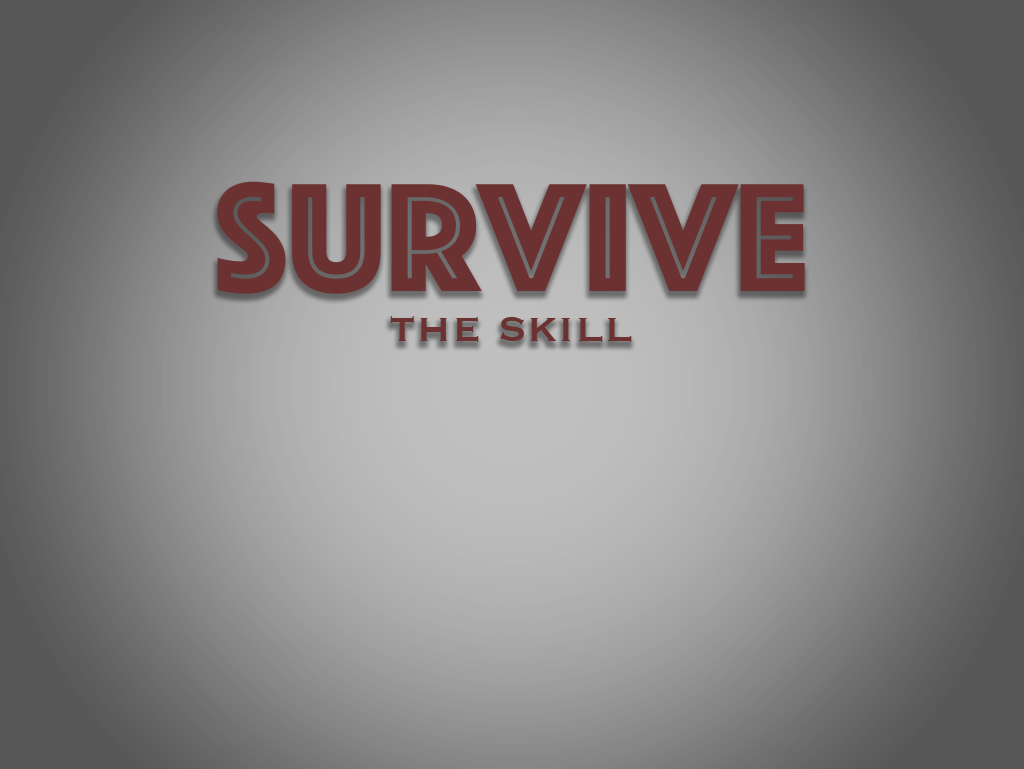
<style>
.page{position:relative;width:1024px;height:769px}
.page>*{position:absolute;margin:0}
.t1{font:160px "Phosphate-Inline";color:#6c3232}
.t2{font:53.3px "Copperplate";color:#6c3232}
</style>
<div class="page">
<p class="t1" style="left:217px;top:181px;width:588px;height:113px">survive</p>
<p class="t2" style="left:390px;top:316px;width:242px;height:26px">the skill</p>
</div>
